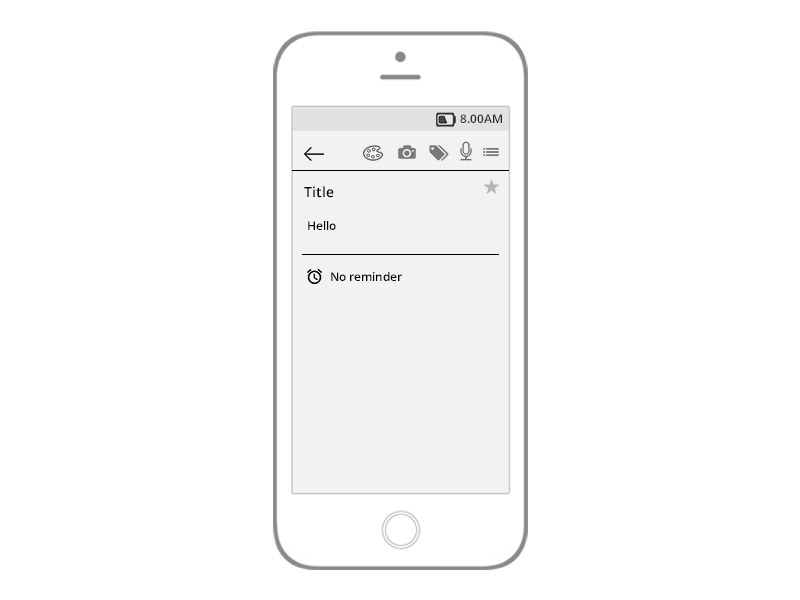
<style>
.page{position:relative;width:800px;height:600px;background:#ffffff}
.page>*{position:absolute;margin:0}
.t1{font:12px "OpenSans-Semibold";color:#2e2d2d}
.t2{font:14px "OpenSans-Semibold";color:#000000}
.t3{font:12px "OpenSans-Semibold";color:#000000}
</style>
<div class="page">
<p class="t1" style="left:460px;top:114px;width:42px;height:9px">8.00AM</p>
<p class="t2" style="left:304px;top:186px;width:30px;height:12px">Title</p>
<p class="t3" style="left:308px;top:221px;width:28px;height:9px">Hello</p>
<p class="t3" style="left:331px;top:272px;width:71px;height:9px">No reminder</p>
</div>
